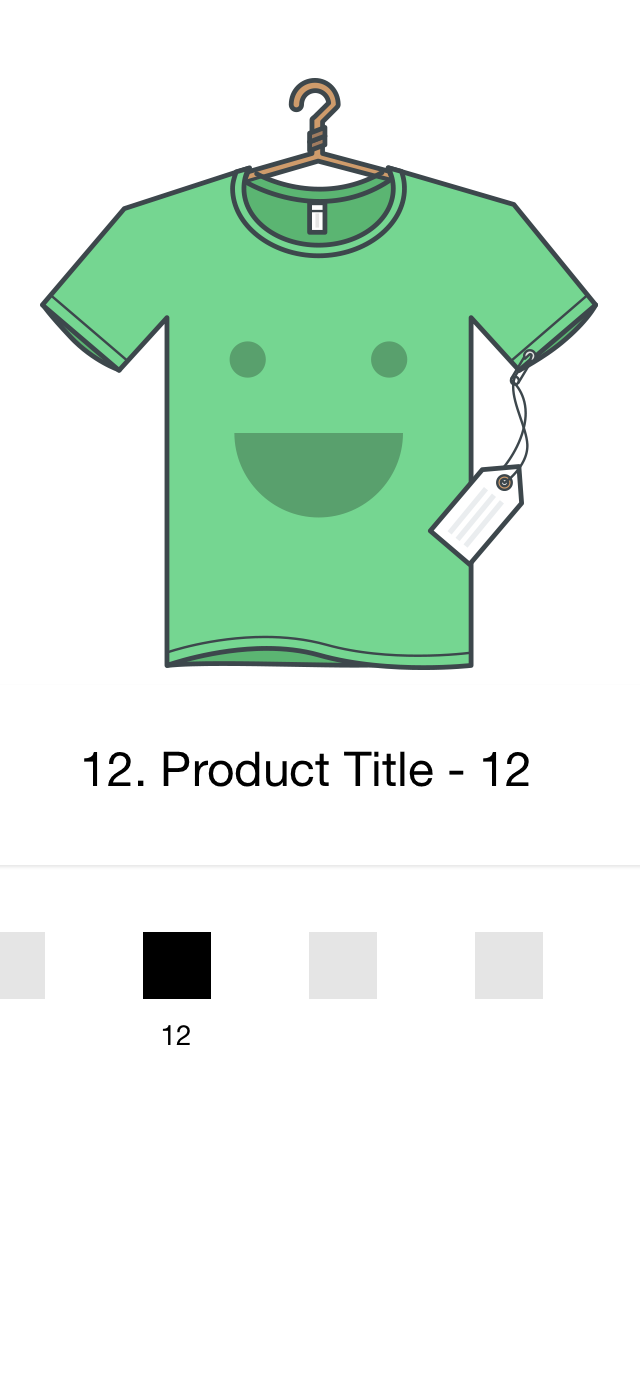
<style>
.page{position:relative;width:640px;height:1400px;background:#ffffff}
.page>*{position:absolute;margin:0}
.t1{font:48px "HelveticaNeue";color:#000000}
.t2{font:28px "HelveticaNeue";color:#000000}
</style>
<div class="page">
<p class="t1" style="left:84px;top:751px;width:445px;height:36px">12. Product Title - 12</p>
<p class="t2" style="left:162px;top:1025px;width:28px;height:20px">12</p>
</div>
